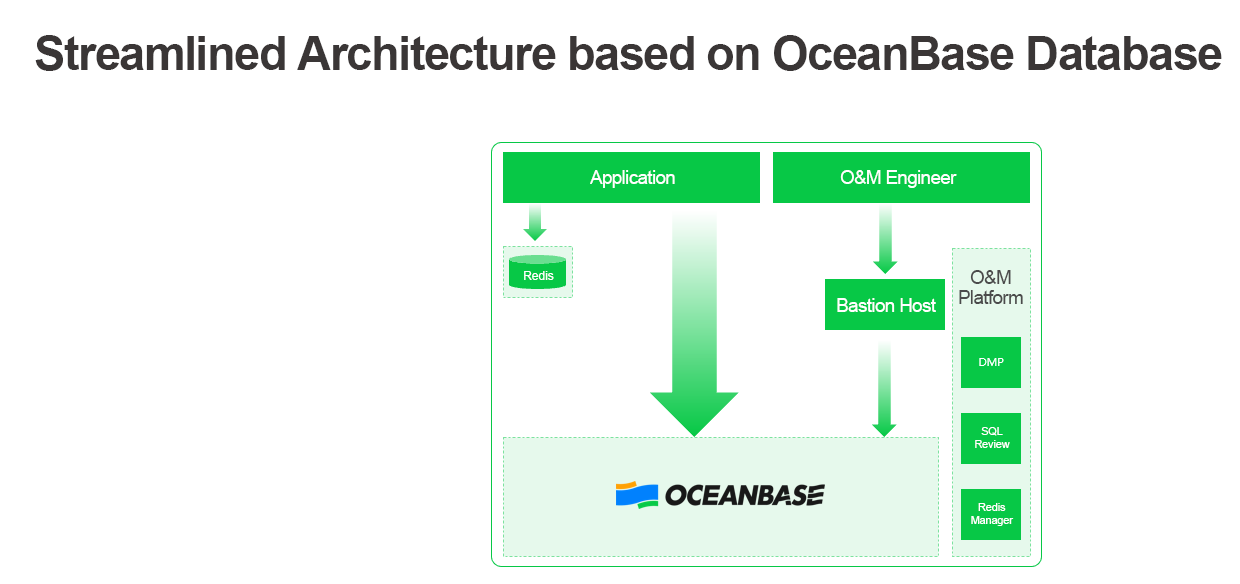
<style>
.page{position:relative;width:1240px;height:584px;background:#ffffff}
.page>*{position:absolute;margin:0}
.t1{font:46.7px "Arial-BoldMT";letter-spacing:-0.03em;color:#3a3636}
.t2{font:18.7px "ArialMT";letter-spacing:-0.03em;color:#ffffff}
.t3{font:18.7px/20px "ArialMT";letter-spacing:-0.03em;color:#4b4b4b}
.t4{font:12px "ArialMT";color:#ffffff}
.t5{font:10.7px/13.3px "ArialMT";color:#ffffff}
</style>
<div class="page">
<p class="t1" style="left:35px;top:35px;width:1187px;height:36px">Streamlined Architecture based on OceanBase Database</p>
<p class="t2" style="left:590px;top:170px;width:85px;height:18px">Application</p>
<p class="t2" style="left:840px;top:170px;width:117px;height:18px">O&amp;M Engineer</p>
<p class="t3" style="left:959px;top:270px;width:64px;height:34px;text-align:center">O&amp;M Platform</p>
<p class="t4" style="left:524px;top:271px;width:30px;height:9px">Redis</p>
<p class="t2" style="left:837px;top:298px;width:99px;height:14px">Bastion Host</p>
<p class="t5" style="left:975px;top:427px;width:35px;height:21px;text-align:center">SQL Review</p>
<p class="t5" style="left:971px;top:503px;width:43px;height:23px;text-align:center">Redis Manager</p>
</div>
